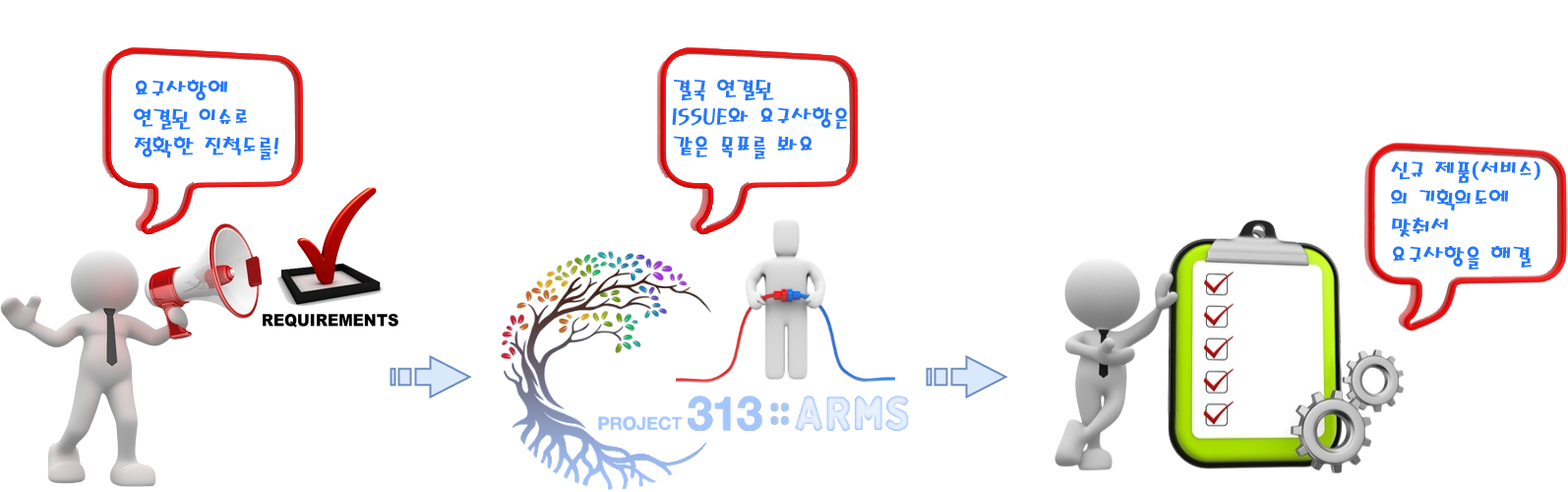
<style>
.page{position:relative;width:1568px;height:492px;background:#ffffff}
.page>*{position:absolute;margin:0}
.t1{font:23.6px "MagicR-HM";color:#2477ff}
</style>
<div class="page">
<p class="t1" style="left:134px;top:80px;width:145px;height:80px">요구사항에 <br>연결된 이슈로<br>정확한 진척도를!</p>
<p class="t1" style="left:672px;top:79px;width:176px;height:80px">결국 연결된 <br>ISSUE와 요구사항은<br>같은 목표를 봐요</p>
<p class="t1" style="left:1391px;top:160px;width:149px;height:110px">신규 제품(서비스)<br>의 기획의도에 <br>맞춰서 요구사항을 해결</p>
</div>
